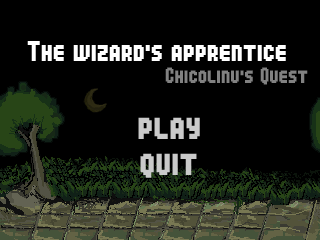
<style>
.page{position:relative;width:320px;height:240px;background:#000000}
.page>*{position:absolute;margin:0}
.t1{font:24px "04b25";color:#ffffff}
.t2{font:18.7px "04b25";color:#818181}
.t3{font:32px "04b25";color:#cacaca}
</style>
<div class="page">
<p class="t1" style="left:27px;top:41px;width:259px;height:20px">The wizard's apprentice</p>
<p class="t2" style="left:165px;top:67px;width:143px;height:18px">Chicolinu's Quest</p>
<p class="t3" style="left:138px;top:117px;width:62px;height:22px">play</p>
<p class="t3" style="left:140px;top:153px;width:57px;height:25px">quit</p>
</div>
